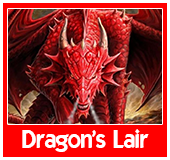
<style>
.page{position:relative;width:170px;height:160px;background:#ff0000}
.page>*{position:absolute;margin:0}
.t1{font:24px "ELEGANCE";color:#ffffff}
</style>
<div class="page">
<p class="t1" style="left:22px;top:129px;width:127px;height:23px">Dragon's Lair</p>
</div>
